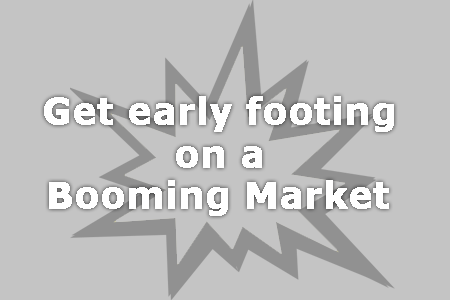
<style>
.page{position:relative;width:450px;height:300px;background:#c4c4c4}
.page>*{position:absolute;margin:0}
.t1{font:36px "Verdana-Bold";color:#ffffff;font-weight:bold}
</style>
<div class="page">
<p class="t1" style="left:44px;top:96px;width:350px;height:36px">Get early footing</p>
<p class="t1" style="left:176px;top:146px;width:86px;height:22px">on a</p>
<p class="t1" style="left:49px;top:180px;width:340px;height:36px">Booming Market</p>
</div>
